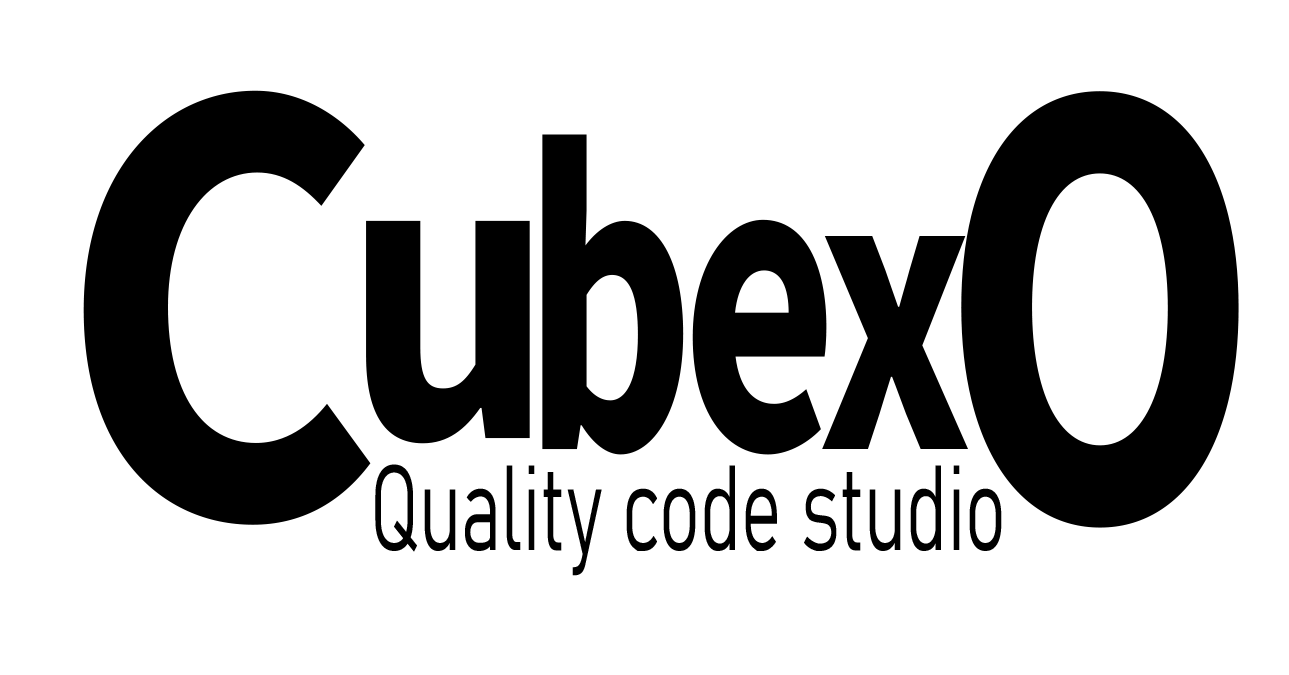
<style>
.page{position:relative;width:1289px;height:675px;background:#ffffff}
.page>*{position:absolute;margin:0}
.t1{font:642.1px "SourceSansRoman-Bold";color:#000000;scale:0.87 1}
.t2{font:645.6px "SourceSansRoman-Bold";color:#000000;scale:0.73 1}
.t3{font:448.9px "SourceSansRoman-Bold";color:#000000;scale:0.67 1}
.t4{font:437.6px "SourceSansRoman-Bold";color:#000000;scale:0.84 1}
.t5{font:451px "SourceSansRoman-Bold";color:#000000;scale:0.67 1}
.t6{font:429.2px "SourceSansRoman-Bold";color:#000000;scale:0.7 1}
.t7{font:119.1px "Bahnschrift-Light";color:#000000;scale:0.63 1}
</style>
<div class="page">
<p class="t1" style="left:83px;top:90px;width:288px;height:435px">C</p>
<p class="t2" style="left:961px;top:91px;width:278px;height:437px">O</p>
<p class="t3" style="left:542px;top:134px;width:142px;height:321px">b</p>
<p class="t4" style="left:366px;top:220px;width:164px;height:224px">u</p>
<p class="t5" style="left:692px;top:219px;width:135px;height:236px">e</p>
<p class="t6" style="left:822px;top:236px;width:146px;height:213px">x</p>
<p class="t7" style="left:375px;top:464px;width:627px;height:112px">Quality code studio</p>
</div>
